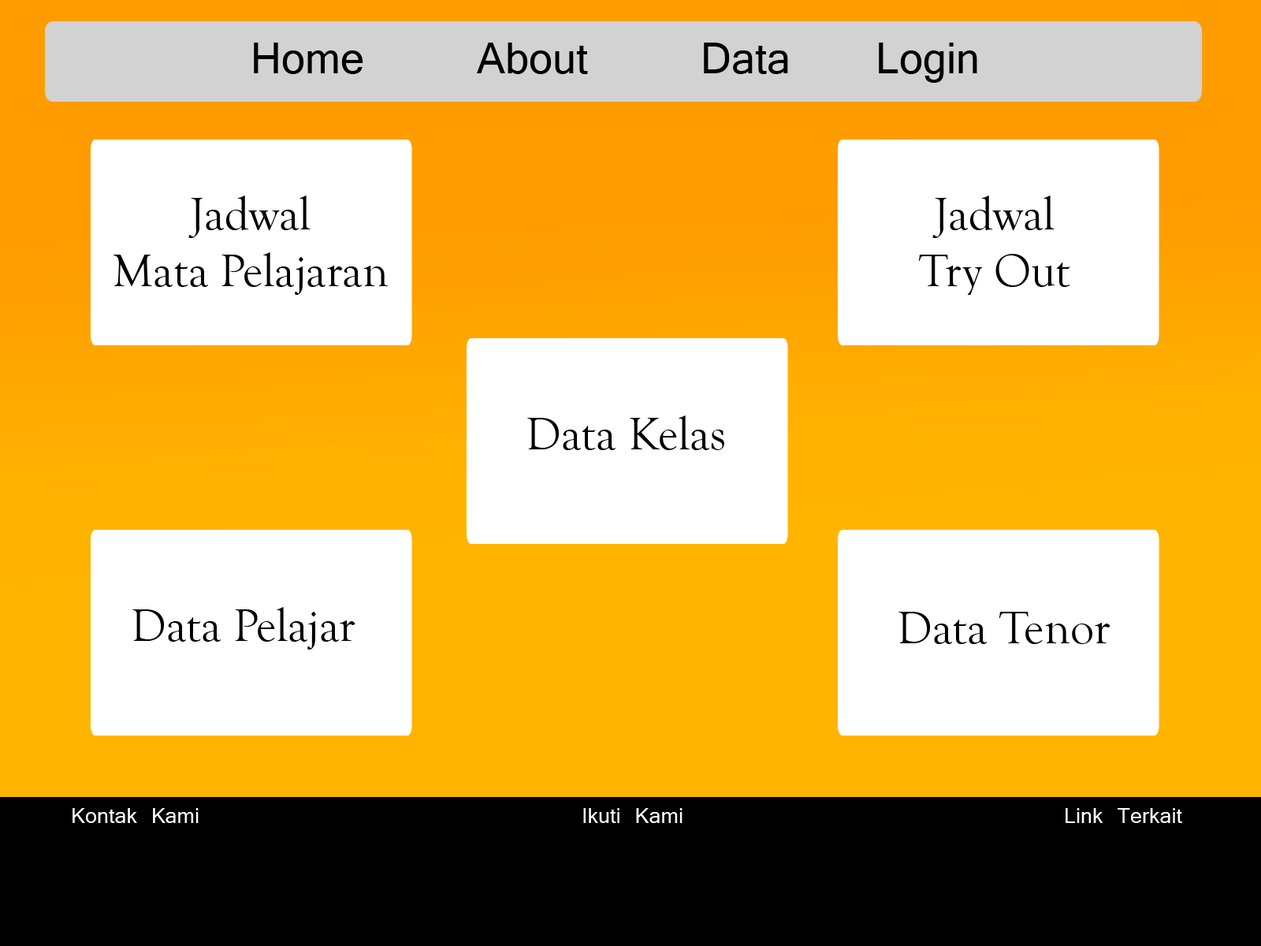
<style>
.page{position:relative;width:1261px;height:946px;background:#ffffff}
.page>*{position:absolute;margin:0}
.t1{font:47.3px "Vrinda";color:#000000}
.t2{font:47.3px "GoudyOldStyleT-Regular";color:#000000}
.t3{font:23.6px "Vrinda";color:#ffffff}
</style>
<div class="page">
<p class="t1" style="left:254px;top:43px;width:723px;height:40px">Home     About    Data   Login</p>
<p class="t2" style="left:113px;top:195px;width:276px;height:100px;text-align:center">Jadwal<br>Mata Pelajaran</p>
<p class="t2" style="left:919px;top:195px;width:151px;height:100px;text-align:center">Jadwal<br>Try Out</p>
<p class="t2" style="left:527px;top:415px;width:197px;height:35px">Data Kelas</p>
<p class="t2" style="left:132px;top:607px;width:223px;height:42px">Data Pelajar</p>
<p class="t2" style="left:898px;top:612px;width:212px;height:32px">Data Tenor</p>
<p class="t3" style="left:73px;top:808px;width:1109px;height:15px">Kontak Kami              Ikuti Kami              Link Terkait</p>
</div>
